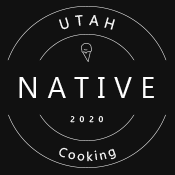
<style>
.page{position:relative;width:175px;height:175px;background:#111111}
.page>*{position:absolute;margin:0}
.t1{font:14.6px "Gadugi";letter-spacing:0.05em;color:#ffffff}
.t2{font:29.2px "Gadugi";color:#ffffff}
.t3{font:7.9px "Gadugi";letter-spacing:0.2em;color:#ffffff}
.t4{font:12.5px "Gadugi";letter-spacing:0.2em;color:#ffffff}
</style>
<div class="page">
<p class="t1" style="left:59px;top:15px;width:56px;height:15px">U T A H</p>
<p class="t2" style="left:19px;top:77px;width:135px;height:21px">N A T I V E</p>
<p class="t3" style="left:70px;top:116px;width:33px;height:7px">2 0 2 0</p>
<p class="t4" style="left:59px;top:147px;width:57px;height:15px">Cooking</p>
</div>
